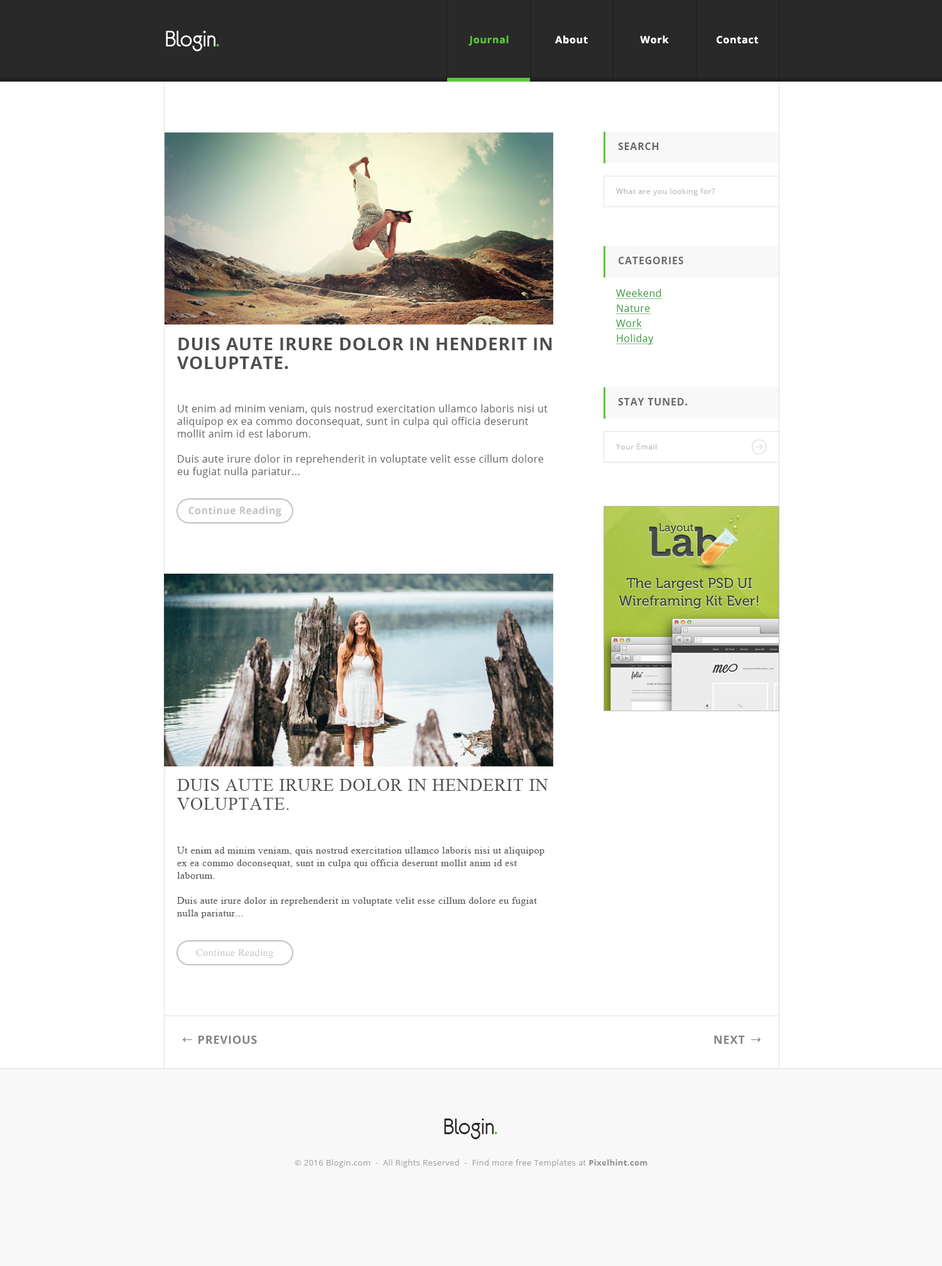
<style>
.page{position:relative;width:942px;height:1266px;background:#ffffff}
.page>*{position:absolute;margin:0}
.t1{font:25.1px "Eurofurenceregular";letter-spacing:-0.02em;color:#ffffff}
.t2{font:25.1px "Eurofurenceregular";letter-spacing:-0.02em;color:#58c93a}
.t3{font:10px "OpenSans-Bold";letter-spacing:0.05em;color:#58c93a}
.t4{font:10px "OpenSans-Bold";letter-spacing:0.05em;color:#ffffff}
.t5{font:10px "OpenSans-Bold";letter-spacing:0.05em;color:#6c6969;text-transform:uppercase}
.t6{font:7.5px "OpenSans";letter-spacing:0.05em;color:#b9b9b9}
.t7{font:10px/15.1px "OpenSans";letter-spacing:0.03em;color:#339933;text-decoration:underline}
.t8{font:17.6px/18.8px "OpenSans-Bold";letter-spacing:0.03em;color:#4f4e4e;text-transform:uppercase}
.t9{font:10px/12.6px "OpenSans";letter-spacing:0.03em;color:#606060}
.t10{font:10px "OpenSans-Bold";letter-spacing:0.03em;color:#c2c1c1}
.t11{font:17.6px/18.8px "TimesNewRomanPSMT";letter-spacing:0.03em;color:#4f4e4e;text-transform:uppercase}
.t12{font:10px/12.6px "TimesNewRomanPSMT";letter-spacing:0.03em;color:#606060}
.t13{font:10px "TimesNewRomanPSMT";letter-spacing:0.03em;color:#c2c1c1}
.t14{font:11.3px "OpenSans-Bold";letter-spacing:0.05em;color:#818181;text-transform:uppercase}
.t15{font:25.1px "Eurofurenceregular";letter-spacing:-0.02em;color:#292929}
.t16{font:8.2px "OpenSans";letter-spacing:0.03em;color:#a6a6a6}
.t17{font:8.2px "OpenSans-Bold";letter-spacing:0.03em;color:#939292}
</style>
<div class="page">
<p class="t1" style="left:166px;top:31px;width:53px;height:20px">Blogin<span class="t2">.</span></p>
<p class="t3" style="left:468px;top:35px;width:41px;height:11px">Journal</p>
<p class="t4" style="left:555px;top:35px;width:33px;height:9px">About</p>
<p class="t4" style="left:640px;top:35px;width:29px;height:9px">Work</p>
<p class="t4" style="left:716px;top:36px;width:42px;height:8px">Contact</p>
<p class="t5" style="left:618px;top:143px;width:41px;height:7px">Search</p>
<p class="t6" style="left:616px;top:188px;width:99px;height:8px">What are you looking for?</p>
<p class="t5" style="left:618px;top:257px;width:65px;height:7px">categories</p>
<p class="t7" style="left:616px;top:289px;width:46px;height:56px">Weekend<br>Nature<br>Work<br>Holiday</p>
<p class="t8" style="left:177px;top:338px;width:375px;height:31px">Duis aute irure dolor in henderit in voluptate.</p>
<p class="t5" style="left:618px;top:398px;width:69px;height:8px">Stay Tuned.</p>
<p class="t9" style="left:177px;top:404px;width:370px;height:74px">Ut enim ad minim veniam, quis nostrud exercitation ullamco laboris nisi ut aliquipop ex ea commo doconsequat, sunt in culpa qui officia deserunt mollit anim id est laborum. <br><br>Duis aute irure dolor in reprehenderit in voluptate velit esse cillum dolore eu fugiat nulla pariatur...</p>
<p class="t6" style="left:616px;top:444px;width:41px;height:6px">Your Email</p>
<p class="t10" style="left:188px;top:506px;width:93px;height:11px">Continue Reading</p>
<p class="t11" style="left:177px;top:779px;width:371px;height:31px">Duis aute irure dolor in henderit in voluptate.</p>
<p class="t12" style="left:177px;top:847px;width:367px;height:71px">Ut enim ad minim veniam, quis nostrud exercitation ullamco laboris nisi ut aliquipop ex ea commo doconsequat, sunt in culpa qui officia deserunt mollit anim id est laborum. <br><br>Duis aute irure dolor in reprehenderit in voluptate velit esse cillum dolore eu fugiat nulla pariatur...</p>
<p class="t13" style="left:196px;top:949px;width:77px;height:10px">Continue Reading</p>
<p class="t14" style="left:198px;top:1036px;width:59px;height:8px">Previous</p>
<p class="t14" style="left:714px;top:1036px;width:31px;height:8px">Next</p>
<p class="t15" style="left:444px;top:1119px;width:53px;height:20px">Blogin<span class="t2">.</span></p>
<p class="t16" style="left:294px;top:1160px;width:353px;height:8px">© 2016 Blogin.com  -  All Rights Reserved  -  Find more free Templates at <span class="t17">Pixelhint.com</span></p>
</div>
